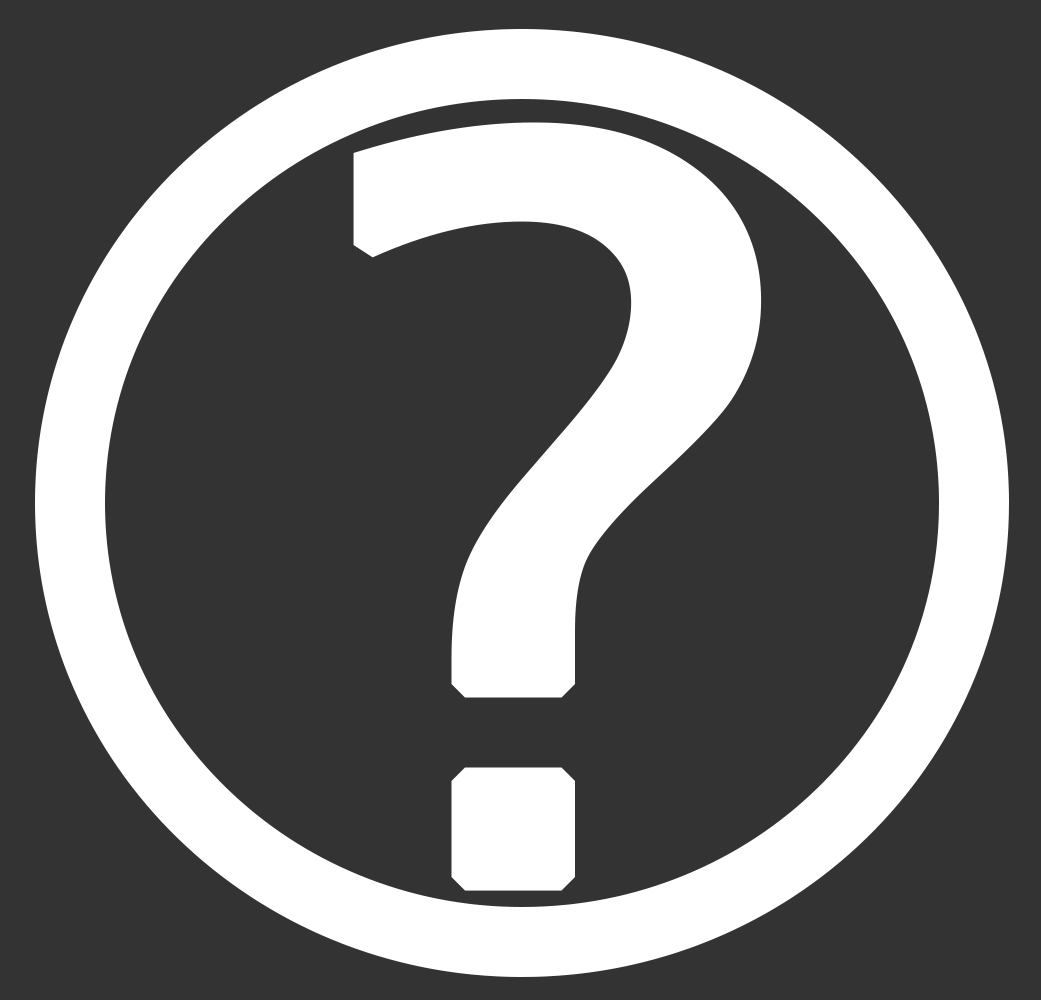
<style>
.page{position:relative;width:1041px;height:1000px;background:#333333}
.page>*{position:absolute;margin:0}
.t1{font:1000px "LucidaSans";color:#ffffff;font-weight:bold}
</style>
<div class="page">
<p class="t1" style="left:353px;top:122px;width:409px;height:769px">?</p>
</div>
